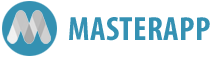
<style>
.page{position:relative;width:216px;height:57px;background:#ffffff}
.page>*{position:absolute;margin:0}
.t1{font:33.9px "MyriadPro-BoldCond";letter-spacing:0.01em;color:#3491b3}
</style>
<div class="page">
<p class="t1" style="left:69px;top:17px;width:141px;height:24px">MASTERAPP</p>
</div>
